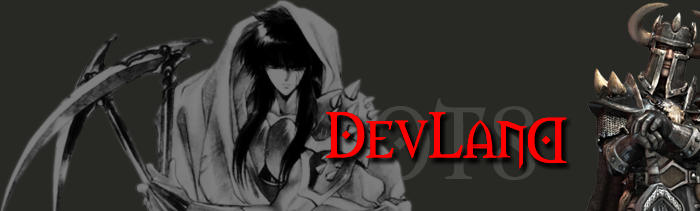
<style>
.page{position:relative;width:700px;height:211px;background:#282824}
.page>*{position:absolute;margin:0}
.t1{font:60px "Morpheus";color:#ff0000}
</style>
<div class="page">
<p class="t1" style="left:326px;top:112px;width:201px;height:57px">DevLan</p>
<p class="t1" style="left:326px;top:112px;width:201px;height:57px">DevLan</p>
<p class="t1" style="left:326px;top:112px;width:201px;height:57px">DevLan</p>
<p class="t1" style="left:528px;top:117px;width:39px;height:46px;rotate:180deg">D</p>
<p class="t1" style="left:528px;top:117px;width:39px;height:46px;rotate:180deg">D</p>
<p class="t1" style="left:528px;top:117px;width:39px;height:46px;rotate:180deg">D</p>
</div>
